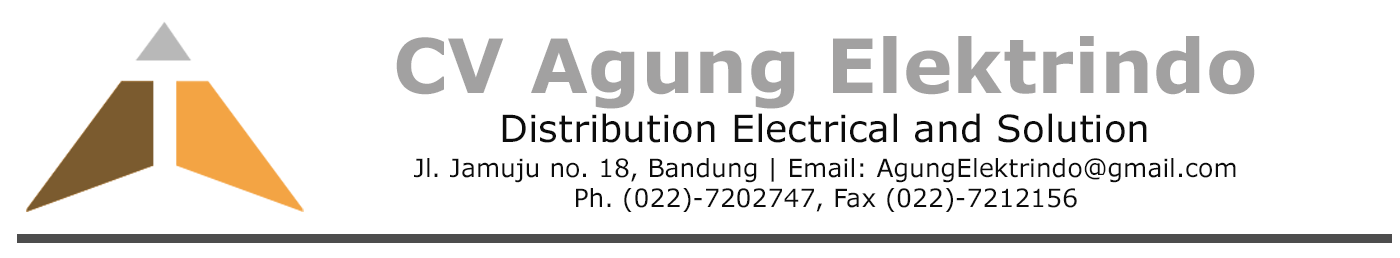
<style>
.page{position:relative;width:1400px;height:258px;background:#ffffff}
.page>*{position:absolute;margin:0}
.t1{font:75px "Verdana-Bold";color:#a2a1a1}
.t2{font:37.5px "Verdana";color:#0c0c0c}
.t3{font:25px "Verdana";color:#0c0c0c}
</style>
<div class="page">
<p class="t1" style="left:396px;top:36px;width:859px;height:73px">CV Agung Elektrindo</p>
<p class="t2" style="left:502px;top:113px;width:645px;height:30px">Distribution Electrical and Solution</p>
<p class="t3" style="left:414px;top:158px;width:822px;height:25px">Jl. Jamuju no. 18, Bandung | Email: AgungElektrindo@gmail.com</p>
<p class="t3" style="left:576px;top:188px;width:501px;height:24px">Ph. (022)-7202747, Fax (022)-7212156</p>
</div>
